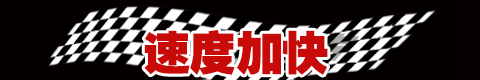
<style>
.page{position:relative;width:480px;height:80px;background:#040000}
.page>*{position:absolute;margin:0}
.t1{font:46.1px "CloudHeiChaoGBK";color:#c80a08}
</style>
<div class="page">
<p class="t1" style="left:144px;top:30px;width:184px;height:45px">速度加快</p>
</div>
